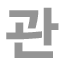
<style>
.page{position:relative;width:63px;height:67px;background:#ffffff}
.page>*{position:absolute;margin:0}
.t1{font:58.3px "YDIYGO350";color:#949494}
</style>
<div class="page">
<p class="t1" style="left:6px;top:7px;width:53px;height:51px">관</p>
</div>
